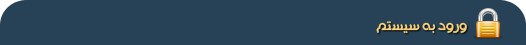
<style>
.page{position:relative;width:526px;height:45px;background:#274257}
.page>*{position:absolute;margin:0}
.t1{font:13.3px "Mj_SudanBold";color:#fad379}
</style>
<div class="page">
<p class="t1" style="left:376px;top:21px;width:91px;height:13px">ورود به سیستم</p>
</div>
